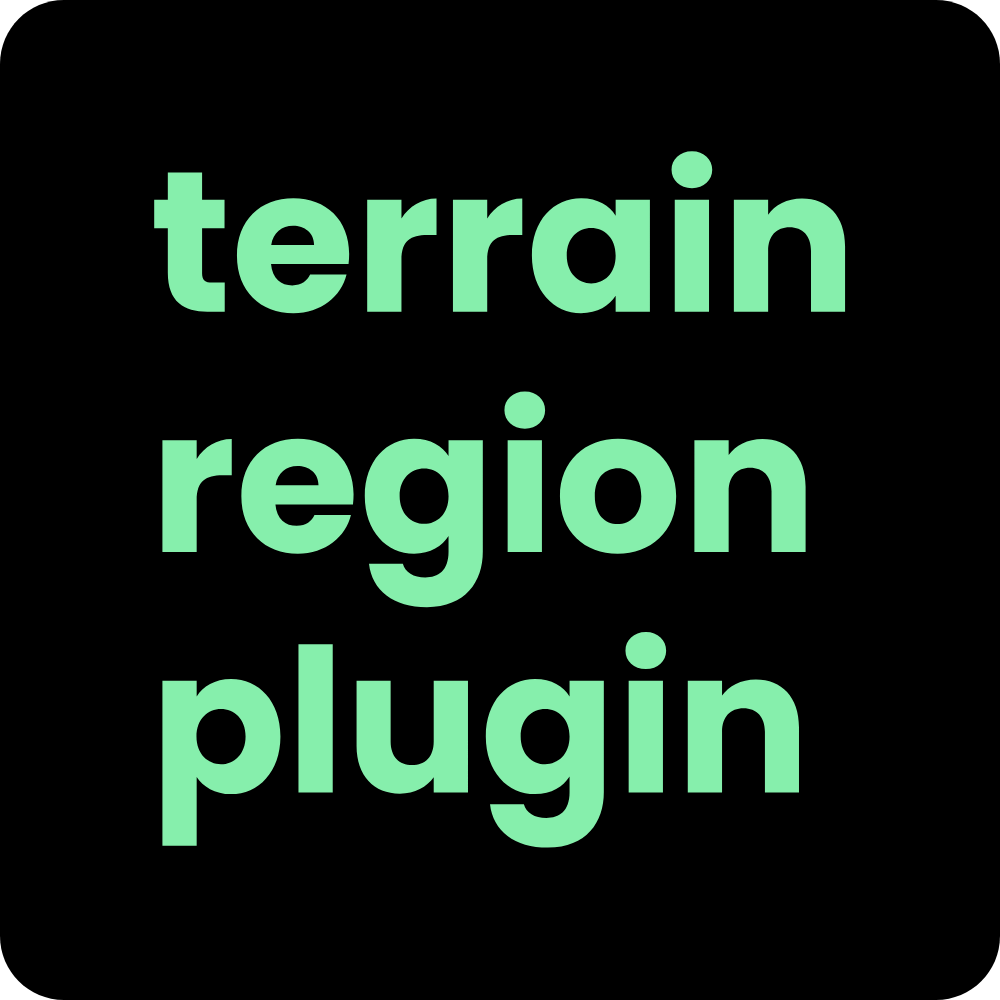
<style>
.page{position:relative;width:1000px;height:1000px;background:#000000}
.page>*{position:absolute;margin:0}
.t1{font:200.4px "Poppins-Bold";color:#86efac}
</style>
<div class="page">
<p class="t1" style="left:154px;top:151px;width:692px;height:697px">terrain<br>region<br>plugin</p>
</div>
